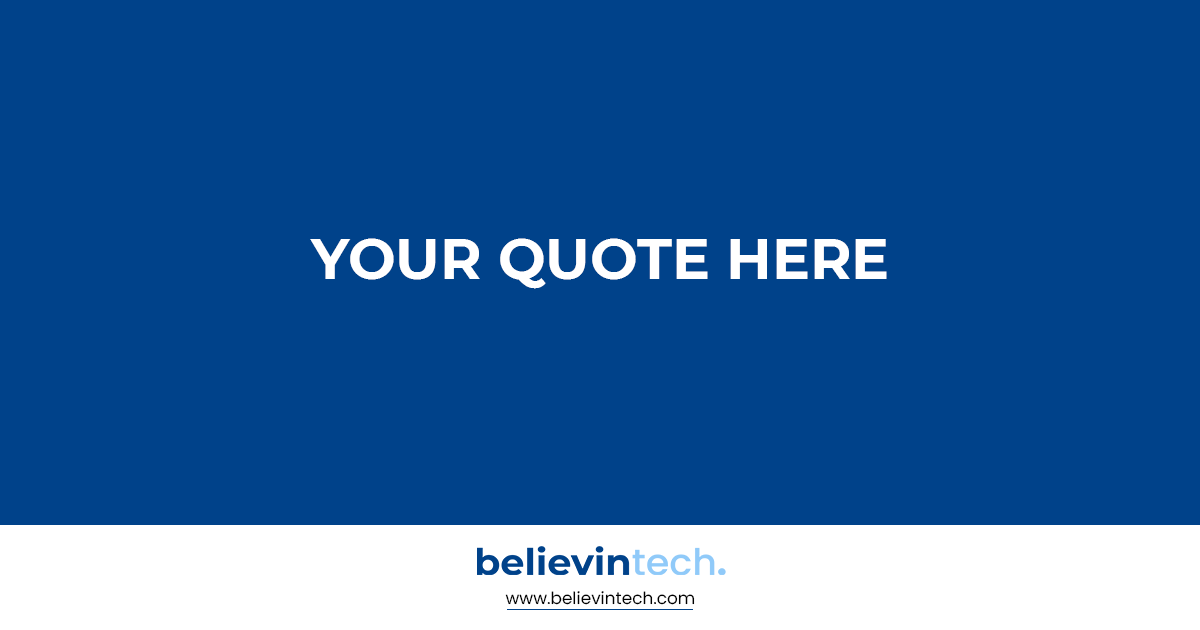
<style>
.page{position:relative;width:1200px;height:630px;background:#00428a}
.page>*{position:absolute;margin:0}
.t1{font:56.6px "Montserrat-Bold";color:#ffffff}
.t2{font:16.9px "Poppins-Regular";color:#000000}
</style>
<div class="page">
<p class="t1" style="left:310px;top:238px;width:577px;height:51px">YOUR QUOTE HERE</p>
<p class="t2" style="left:505px;top:591px;width:190px;height:14px">www.believintech.com</p>
</div>
